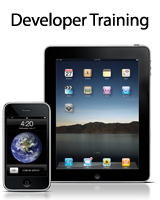
<style>
.page{position:relative;width:160px;height:200px;background:#ffffff}
.page>*{position:absolute;margin:0}
.t1{font:18px "MyriadPro-Regular";letter-spacing:-0.01em;color:#000000}
</style>
<div class="page">
<p class="t1" style="left:11px;top:12px;width:138px;height:18px">Developer Training</p>
</div>
